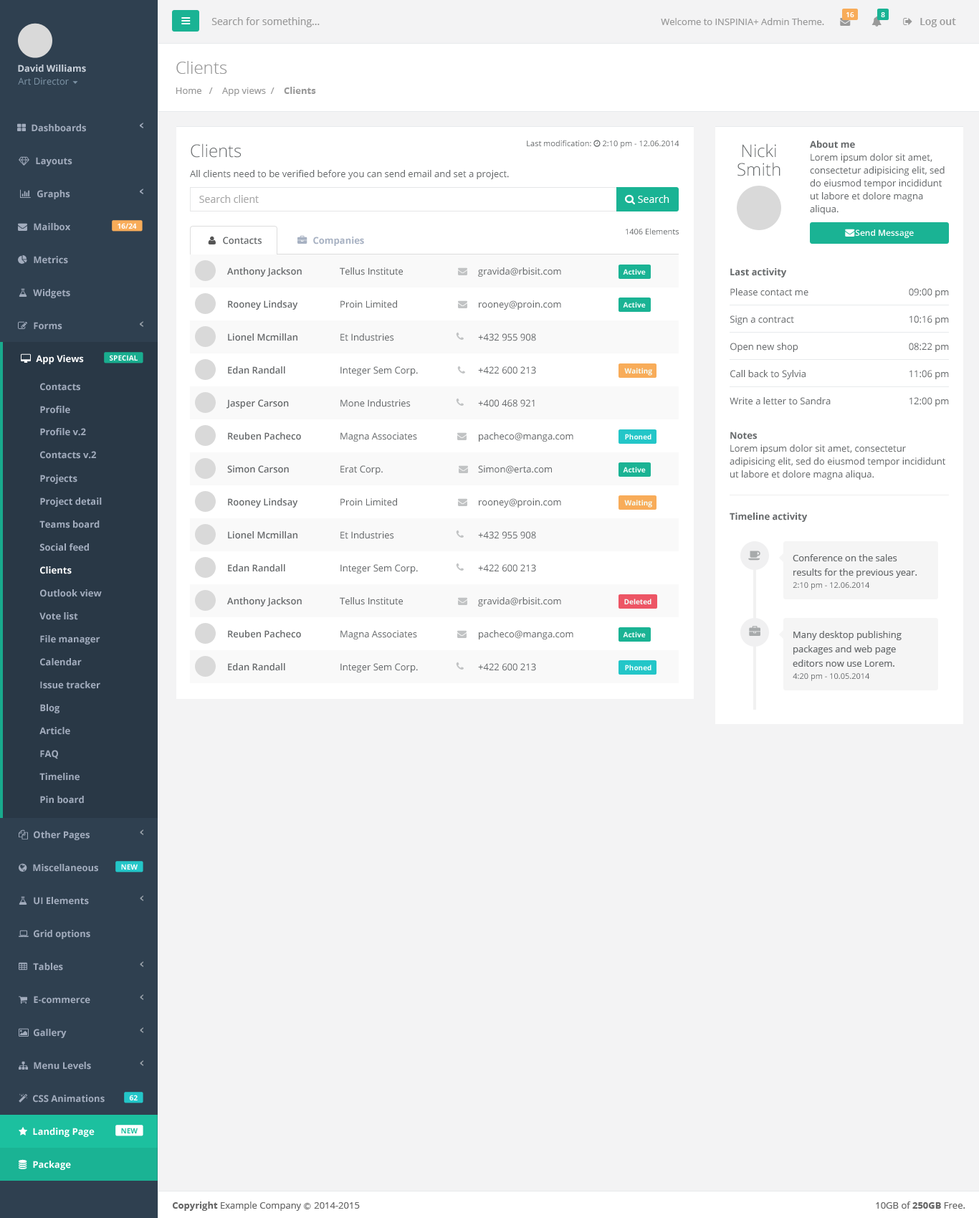
<style>
.page{position:relative;width:979px;height:1218px;background:#f3f3f4}
.page>*{position:absolute;margin:0}
.t1{font:10px "OpenSans";color:#999999}
.t2{font:9.3px "OpenSans";color:#999999}
.t3{font:7.2px "OpenSans-Semibold";color:#ffffff}
.t4{font:10px "OpenSans-Semibold";color:#999999}
.t5{font:9.3px "OpenSans-Bold";color:#cad1db}
.t6{font:17.2px "OpenSans-Light";color:#999999}
.t7{font:9.3px "OpenSans";color:#7d93a5}
.t8{font:9.3px "OpenSans-Bold";color:#999999}
.t9{font:9.3px "OpenSans-Bold";color:#a2acbd}
.t10{font:17.2px "OpenSans-Light";color:#676a6c}
.t11{font:17.2px/18.6px "OpenSans-Light";color:#676a6c}
.t12{font:9.3px "OpenSans-Bold";color:#676a6c}
.t13{font:9.3px/12.9px "OpenSans";color:#676a6c}
.t14{font:9.3px "OpenSans";color:#676a6c}
.t15{font:10px "OpenSans";color:#a9a9a9}
.t16{font:10px "OpenSans";color:#ffffff}
.t17{font:7.2px "OpenSans-Bold";color:#fefefe}
.t18{font:7.9px "OpenSans";color:#676a6c}
.t19{font:8.6px "OpenSans-Semibold";color:#ffffff}
.t20{font:9.3px "OpenSans-Semibold";color:#676a6c}
.t21{font:9.3px "OpenSans-Bold";color:#a7b1c2}
.t22{font:7.2px "OpenSans-Bold";color:#f3fffc}
.t23{font:9.3px "OpenSans-Bold";color:#ffffff}
.t24{font:9.3px/14.3px "OpenSans";color:#676a6c}
.t25{font:7.2px "OpenSans-Bold";color:#1cc09f}
.t26{font:9.3px "OpenSans";color:#666666}
.t27{font:9.3px "OpenSans-Bold";color:#666666}
.t28{font:7.2px "Meiryo";color:#666666}
</style>
<div class="page">
<p class="t1" style="left:211px;top:17px;width:109px;height:10px">Search for something...</p>
<p class="t2" style="left:661px;top:18px;width:163px;height:7px">Welcome to INSPINIA+ Admin Theme.</p>
<p class="t3" style="left:847px;top:12px;width:7px;height:5px">16</p>
<p class="t3" style="left:881px;top:12px;width:4px;height:5px">8</p>
<p class="t4" style="left:920px;top:18px;width:36px;height:9px">Log out</p>
<p class="t5" style="left:18px;top:65px;width:68px;height:7px">David Williams</p>
<p class="t6" style="left:176px;top:61px;width:51px;height:13px">Clients</p>
<p class="t7" style="left:18px;top:77px;width:51px;height:8px">Art Director</p>
<p class="t2" style="left:176px;top:87px;width:140px;height:9px">Home   /    App views  /   <span class="t8"> Clients</span></p>
<p class="t9" style="left:32px;top:124px;width:54px;height:8px">Dashboards</p>
<p class="t10" style="left:191px;top:143px;width:50px;height:15px">Clients</p>
<p class="t11" style="left:738px;top:143px;width:43px;height:33px;text-align:center">Nicki<br>Smith</p>
<p class="t12" style="left:810px;top:140px;width:45px;height:8px">About me</p>
<p class="t9" style="left:36px;top:157px;width:36px;height:9px">Layouts</p>
<p class="t13" style="left:810px;top:153px;width:135px;height:61px">Lorem ipsum dolor sit amet, consectetur adipisicing elit, sed do eiusmod tempor incididunt ut labore et dolore magna aliqua.</p>
<p class="t14" style="left:190px;top:170px;width:319px;height:9px">All clients need to be verified before you can send email and set a project.</p>
<p class="t9" style="left:37px;top:190px;width:33px;height:9px">Graphs</p>
<p class="t15" style="left:199px;top:195px;width:60px;height:8px">Search client</p>
<p class="t16" style="left:638px;top:195px;width:31px;height:8px">Search</p>
<p class="t9" style="left:34px;top:223px;width:36px;height:8px">Mailbox</p>
<p class="t17" style="left:118px;top:223px;width:19px;height:6px">16/24</p>
<p class="t18" style="left:626px;top:228px;width:53px;height:6px">1406 Elements</p>
<p class="t19" style="left:855px;top:229px;width:59px;height:9px">Send Message</p>
<p class="t20" style="left:223px;top:237px;width:39px;height:7px">Contacts</p>
<p class="t21" style="left:313px;top:237px;width:51px;height:9px">Companies</p>
<p class="t9" style="left:34px;top:256px;width:34px;height:8px">Metrics</p>
<p class="t20" style="left:227px;top:267px;width:75px;height:10px">Anthony Jackson</p>
<p class="t14" style="left:340px;top:267px;width:63px;height:8px">Tellus Institute</p>
<p class="t14" style="left:478px;top:267px;width:83px;height:10px">gravida@rbisit.com</p>
<p class="t22" style="left:623px;top:269px;width:23px;height:6px">Active</p>
<p class="t12" style="left:730px;top:268px;width:57px;height:9px">Last activity</p>
<p class="t9" style="left:33px;top:289px;width:37px;height:9px">Widgets</p>
<p class="t14" style="left:730px;top:288px;width:79px;height:8px">Please contact me</p>
<p class="t14" style="left:909px;top:288px;width:40px;height:9px">09:00 pm</p>
<p class="t20" style="left:228px;top:300px;width:70px;height:10px">Rooney Lindsay</p>
<p class="t14" style="left:340px;top:300px;width:57px;height:8px">Proin Limited</p>
<p class="t14" style="left:479px;top:300px;width:82px;height:10px">rooney@proin.com</p>
<p class="t22" style="left:623px;top:302px;width:23px;height:6px">Active</p>
<p class="t14" style="left:730px;top:315px;width:64px;height:10px">Sign a contract</p>
<p class="t14" style="left:910px;top:315px;width:39px;height:10px">10:16 pm</p>
<p class="t9" style="left:34px;top:322px;width:28px;height:8px">Forms</p>
<p class="t20" style="left:228px;top:333px;width:69px;height:8px">Lionel Mcmillan</p>
<p class="t14" style="left:340px;top:333px;width:54px;height:8px">Et Industries</p>
<p class="t14" style="left:478px;top:333px;width:58px;height:8px">+432 955 908</p>
<p class="t14" style="left:730px;top:343px;width:68px;height:9px">Open new shop</p>
<p class="t14" style="left:909px;top:343px;width:40px;height:9px">08:22 pm</p>
<p class="t23" style="left:36px;top:355px;width:48px;height:9px">App Views</p>
<p class="t17" style="left:110px;top:355px;width:28px;height:6px">SPECIAL</p>
<p class="t20" style="left:228px;top:366px;width:57px;height:8px">Edan Randall</p>
<p class="t14" style="left:340px;top:366px;width:78px;height:10px">Integer Sem Corp.</p>
<p class="t14" style="left:478px;top:366px;width:58px;height:8px">+422 600 213</p>
<p class="t22" style="left:624px;top:368px;width:28px;height:8px">Waiting</p>
<p class="t14" style="left:730px;top:370px;width:76px;height:9px">Call back to Sylvia</p>
<p class="t14" style="left:910px;top:370px;width:39px;height:9px">11:06 pm</p>
<p class="t9" style="left:40px;top:383px;width:40px;height:8px">Contacts</p>
<p class="t20" style="left:227px;top:399px;width:62px;height:10px">Jasper Carson</p>
<p class="t14" style="left:340px;top:399px;width:71px;height:8px">Mone Industries</p>
<p class="t14" style="left:478px;top:399px;width:57px;height:8px">+400 468 921</p>
<p class="t14" style="left:730px;top:397px;width:101px;height:8px">Write a letter to Sandra</p>
<p class="t14" style="left:910px;top:397px;width:39px;height:9px">12:00 pm</p>
<p class="t9" style="left:40px;top:406px;width:30px;height:8px">Profile</p>
<p class="t9" style="left:40px;top:428px;width:46px;height:8px">Profile v.2</p>
<p class="t20" style="left:228px;top:432px;width:73px;height:8px">Reuben Pacheco</p>
<p class="t14" style="left:340px;top:432px;width:77px;height:10px">Magna Associates</p>
<p class="t14" style="left:479px;top:432px;width:94px;height:10px">pacheco@manga.com</p>
<p class="t22" style="left:625px;top:434px;width:27px;height:5px">Phoned</p>
<p class="t12" style="left:730px;top:432px;width:27px;height:7px">Notes</p>
<p class="t13" style="left:730px;top:444px;width:215px;height:36px">Lorem ipsum dolor sit amet, consectetur adipisicing elit, sed do eiusmod tempor incididunt ut labore et dolore magna aliqua.</p>
<p class="t9" style="left:40px;top:451px;width:56px;height:8px">Contacts v.2</p>
<p class="t20" style="left:227px;top:465px;width:62px;height:8px">Simon Carson</p>
<p class="t14" style="left:340px;top:465px;width:43px;height:10px">Erat Corp.</p>
<p class="t14" style="left:478px;top:465px;width:74px;height:9px">Simon@erta.com</p>
<p class="t22" style="left:623px;top:467px;width:23px;height:5px">Active</p>
<p class="t9" style="left:40px;top:475px;width:37px;height:9px">Projects</p>
<p class="t9" style="left:40px;top:497px;width:62px;height:10px">Project detail</p>
<p class="t20" style="left:228px;top:498px;width:70px;height:9px">Rooney Lindsay</p>
<p class="t14" style="left:340px;top:498px;width:57px;height:8px">Proin Limited</p>
<p class="t14" style="left:479px;top:498px;width:82px;height:9px">rooney@proin.com</p>
<p class="t22" style="left:624px;top:500px;width:28px;height:7px">Waiting</p>
<p class="t9" style="left:39px;top:520px;width:61px;height:8px">Teams board</p>
<p class="t12" style="left:730px;top:513px;width:78px;height:9px">Timeline activity</p>
<p class="t20" style="left:228px;top:531px;width:69px;height:8px">Lionel Mcmillan</p>
<p class="t14" style="left:340px;top:531px;width:54px;height:8px">Et Industries</p>
<p class="t14" style="left:478px;top:531px;width:58px;height:8px">+432 955 908</p>
<p class="t9" style="left:39px;top:543px;width:50px;height:8px">Social feed</p>
<p class="t24" style="left:793px;top:554px;width:124px;height:24px">Conference on the sales results for the previous year.</p>
<p class="t23" style="left:40px;top:566px;width:32px;height:8px">Clients</p>
<p class="t20" style="left:228px;top:564px;width:57px;height:8px">Edan Randall</p>
<p class="t14" style="left:340px;top:564px;width:78px;height:9px">Integer Sem Corp.</p>
<p class="t14" style="left:478px;top:564px;width:58px;height:8px">+422 600 213</p>
<p class="t9" style="left:40px;top:589px;width:62px;height:8px">Outlook view</p>
<p class="t18" style="left:793px;top:582px;width:76px;height:8px">2:10 pm - 12.06.2014</p>
<p class="t20" style="left:227px;top:597px;width:75px;height:9px">Anthony Jackson</p>
<p class="t14" style="left:340px;top:597px;width:63px;height:8px">Tellus Institute</p>
<p class="t14" style="left:478px;top:597px;width:83px;height:9px">gravida@rbisit.com</p>
<p class="t22" style="left:624px;top:599px;width:28px;height:5px">Deleted</p>
<p class="t9" style="left:39px;top:612px;width:39px;height:8px">Vote list</p>
<p class="t9" style="left:40px;top:635px;width:60px;height:9px">File manager</p>
<p class="t20" style="left:228px;top:630px;width:73px;height:8px">Reuben Pacheco</p>
<p class="t14" style="left:340px;top:630px;width:77px;height:9px">Magna Associates</p>
<p class="t14" style="left:479px;top:630px;width:94px;height:9px">pacheco@manga.com</p>
<p class="t22" style="left:623px;top:631px;width:23px;height:6px">Active</p>
<p class="t24" style="left:793px;top:631px;width:109px;height:36px">Many desktop publishing packages and web page editors now use Lorem.</p>
<p class="t9" style="left:40px;top:658px;width:42px;height:8px">Calendar</p>
<p class="t20" style="left:228px;top:663px;width:57px;height:8px">Edan Randall</p>
<p class="t14" style="left:340px;top:663px;width:78px;height:9px">Integer Sem Corp.</p>
<p class="t14" style="left:478px;top:663px;width:58px;height:8px">+422 600 213</p>
<p class="t22" style="left:625px;top:664px;width:27px;height:6px">Phoned</p>
<p class="t18" style="left:793px;top:673px;width:76px;height:8px">4:20 pm - 10.05.2014</p>
<p class="t9" style="left:40px;top:681px;width:60px;height:8px">Issue tracker</p>
<p class="t9" style="left:40px;top:704px;width:19px;height:9px">Blog</p>
<p class="t9" style="left:39px;top:727px;width:31px;height:8px">Article</p>
<p class="t9" style="left:40px;top:750px;width:18px;height:9px">FAQ</p>
<p class="t9" style="left:39px;top:773px;width:41px;height:8px">Timeline</p>
<p class="t9" style="left:40px;top:796px;width:44px;height:8px">Pin board</p>
<p class="t9" style="left:34px;top:831px;width:56px;height:9px">Other Pages</p>
<p class="t9" style="left:33px;top:864px;width:65px;height:8px">Miscellaneous</p>
<p class="t17" style="left:121px;top:864px;width:17px;height:5px">NEW</p>
<p class="t9" style="left:34px;top:897px;width:55px;height:8px">UI Elements</p>
<p class="t9" style="left:34px;top:930px;width:56px;height:9px">Grid options</p>
<p class="t9" style="left:33px;top:963px;width:30px;height:8px">Tables</p>
<p class="t9" style="left:34px;top:996px;width:56px;height:8px">E-commerce</p>
<p class="t9" style="left:34px;top:1029px;width:33px;height:9px">Gallery</p>
<p class="t9" style="left:34px;top:1062px;width:57px;height:7px">Menu Levels</p>
<p class="t9" style="left:33px;top:1095px;width:72px;height:7px">CSS Animations</p>
<p class="t17" style="left:129px;top:1095px;width:9px;height:5px">62</p>
<p class="t23" style="left:33px;top:1128px;width:62px;height:9px">Landing Page</p>
<p class="t25" style="left:121px;top:1128px;width:17px;height:5px">NEW</p>
<p class="t23" style="left:33px;top:1160px;width:38px;height:10px">Package</p>
<p class="t26" style="left:172px;top:1201px;width:188px;height:10px"><span class="t27">Copyright</span> Example Company <span class="t28">Ⓒ </span>2014-2015</p>
<p class="t26" style="left:876px;top:1201px;width:90px;height:8px">10GB of <span class="t27">250GB</span> Free.</p>
</div>
